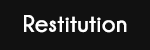
<style>
.page{position:relative;width:150px;height:50px;background:#111111}
.page>*{position:absolute;margin:0}
.t1{font:24px "Champagne&Limousines-Bold";letter-spacing:0.02em;color:#ffffff}
</style>
<div class="page">
<p class="t1" style="left:24px;top:15px;width:103px;height:18px">Restitution</p>
</div>
